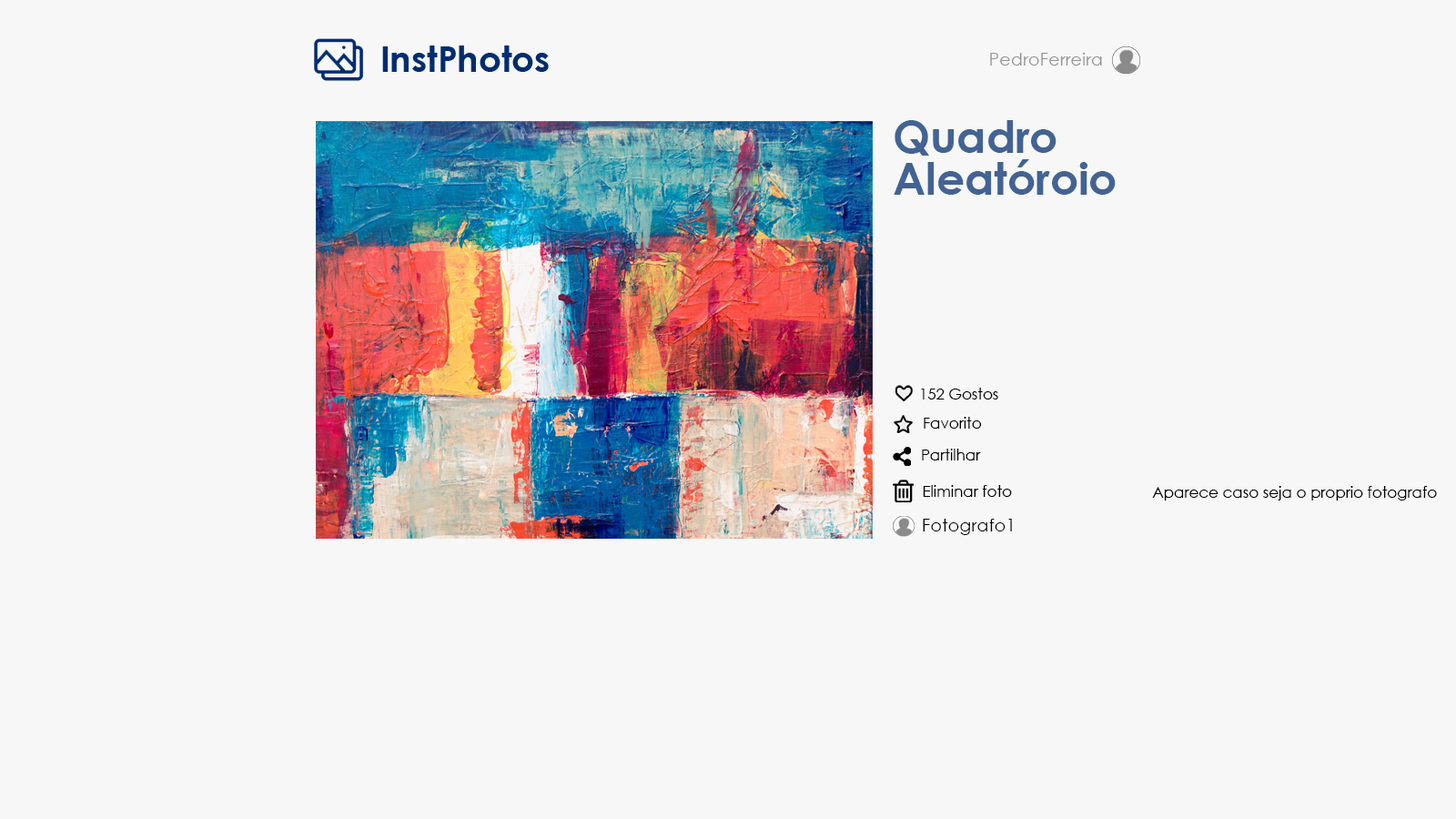
<style>
.page{position:relative;width:1456px;height:819px;background:#f7f7f7}
.page>*{position:absolute;margin:0}
.t1{font:17.7px "CenturyGothic";color:#929292}
.t2{font:44.2px/41.7px "CenturyGothic-Bold";color:#426394}
.t3{font:15.2px "CenturyGothic";color:#000000}
.t4{font:17.7px "CenturyGothic";color:#000000}
</style>
<div class="page">
<p class="t1" style="left:990px;top:53px;width:112px;height:13px">PedroFerreira</p>
<p class="t2" style="left:894px;top:120px;width:222px;height:75px">Quadro <br>Aleatóroio</p>
<p class="t3" style="left:921px;top:388px;width:77px;height:11px">152 Gostos</p>
<p class="t3" style="left:924px;top:417px;width:58px;height:12px">Favorito</p>
<p class="t3" style="left:922px;top:449px;width:59px;height:11px">Partilhar</p>
<p class="t3" style="left:923px;top:485px;width:89px;height:12px">Eliminar foto</p>
<p class="t3" style="left:1152px;top:486px;width:285px;height:14px">Aparece caso seja o proprio fotografo</p>
<p class="t4" style="left:923px;top:519px;width:89px;height:16px">Fotografo1</p>
</div>
